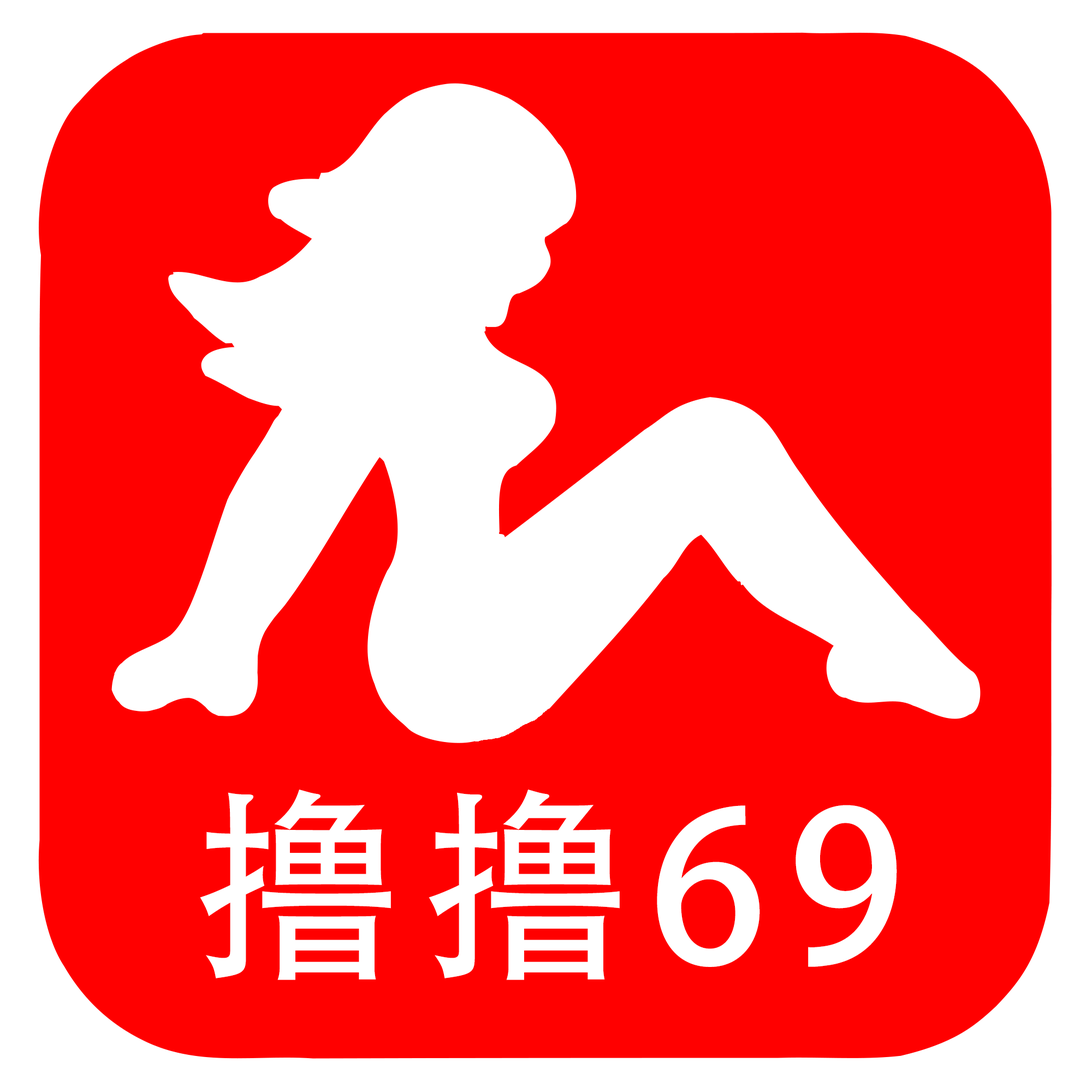
<style>
.page{position:relative;width:1092px;height:1092px;background:#ff0000}
.page>*{position:absolute;margin:0}
.t1{font:208px "AdobeHeitiStd-Regular";letter-spacing:0.1em;color:#ffffff}
</style>
<div class="page">
<p class="t1" style="left:200px;top:790px;width:697px;height:190px">撸撸69</p>
</div>
